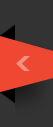
<style>
.page{position:relative;width:53px;height:127px;background:#333333}
.page>*{position:absolute;margin:0}
.t1{font:40px "Cabin-Bold";color:#f58f82}
</style>
<div class="page">
<p class="t1" style="left:16px;top:55px;width:15px;height:17px">&lt;</p>
</div>
